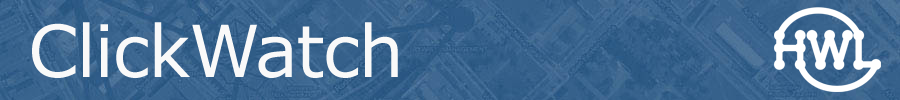
<style>
.page{position:relative;width:900px;height:100px}
.page>*{position:absolute;margin:0}
.t1{font:72px "Verdana";letter-spacing:-0.025em;color:#f9f9f9}
</style>
<div class="page">
<p class="t1" style="left:32px;top:22px;width:366px;height:56px">ClickWatch</p>
</div>
